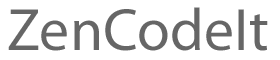
<style>
.page{position:relative;width:280px;height:60px;background:#ffffff}
.page>*{position:absolute;margin:0}
.t1{font:60px "MyriadPro-Regular";color:#666666}
</style>
<div class="page">
<p class="t1" style="left:8px;top:7px;width:260px;height:44px">ZenCodeIt</p>
<p class="t1" style="left:9px;top:8px;width:260px;height:44px">ZenCodeIt</p>
</div>
